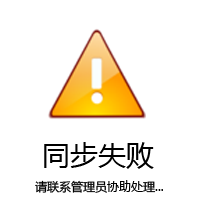
<style>
.page{position:relative;width:200px;height:200px;background:#ffffff}
.page>*{position:absolute;margin:0}
.t1{font:28px "MicrosoftYaHei";color:#000000}
.t2{font:12px "MicrosoftYaHei";color:#000000}
</style>
<div class="page">
<p class="t1" style="left:44px;top:142px;width:110px;height:27px">同步失败</p>
<p class="t2" style="left:35px;top:180px;width:128px;height:13px">请联系管理员协助处理...</p>
</div>
